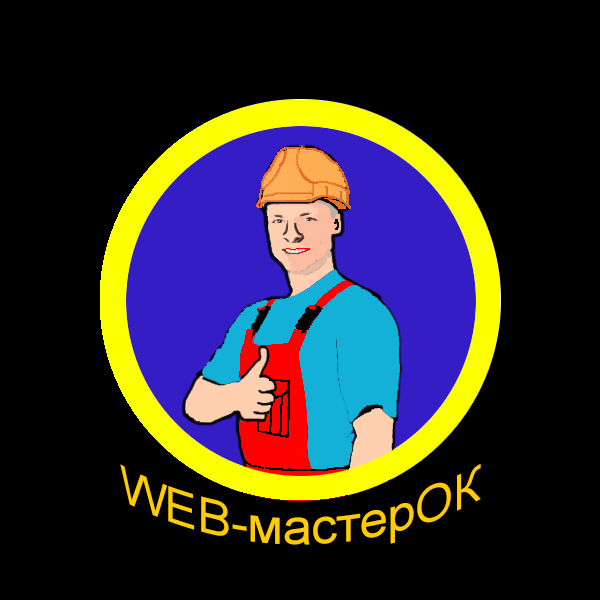
<style>
.page{position:relative;width:600px;height:600px;background:#000000}
.page>*{position:absolute;margin:0}
.t1{font:48px "ArialMT";color:#ffcc00}
</style>
<div class="page">
<p class="t1" style="left:120px;top:463px;width:361px;height:82px;text-align:center">WEB-мастерОК</p>
</div>
